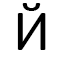
<style>
.page{position:relative;width:64px;height:64px;background:#ffffff}
.page>*{position:absolute;margin:0}
.t1{font:58.3px "Calibri";color:#000000}
</style>
<div class="page">
<p class="t1" style="left:17px;top:3px;width:29px;height:47px">Й</p>
</div>
